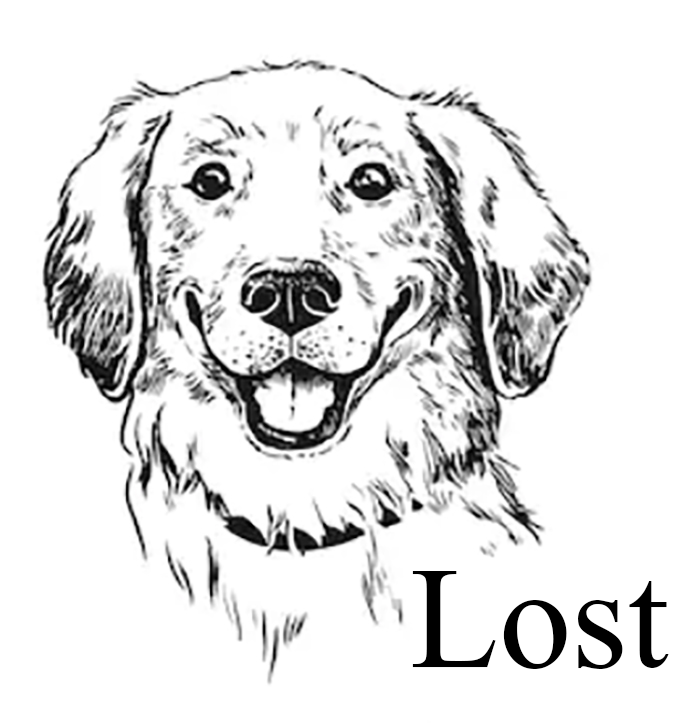
<style>
.page{position:relative;width:700px;height:723px;background:#ffffff}
.page>*{position:absolute;margin:0}
.t1{font:145px "MongolianBaiti";color:#000000}
</style>
<div class="page">
<p class="t1" style="left:412px;top:571px;width:257px;height:98px">Lost</p>
</div>
